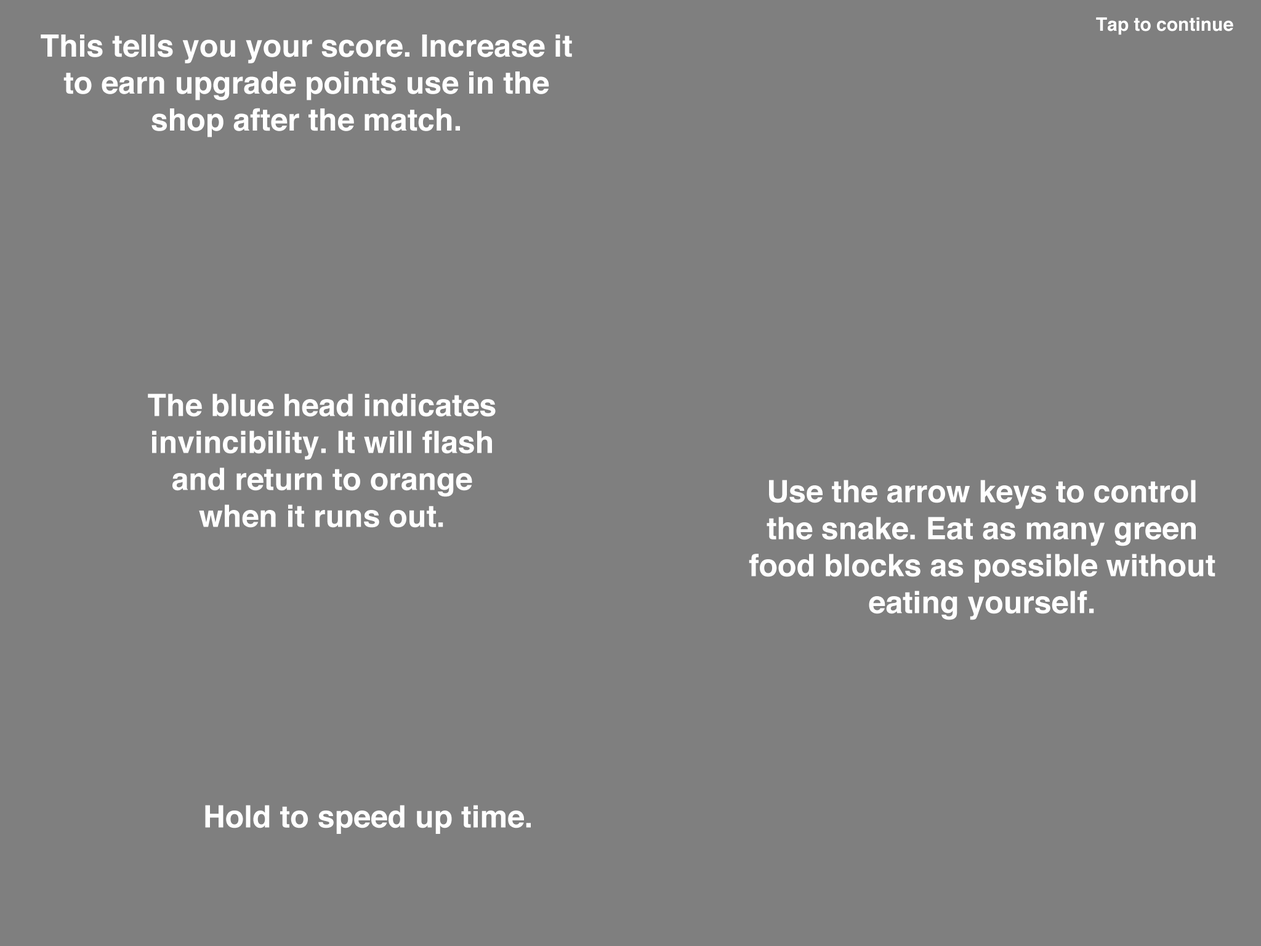
<style>
.page{position:relative;width:1261px;height:946px;background:#7f7f7f}
.page>*{position:absolute;margin:0}
.t1{font:18.5px "Helvetica-Bold";color:#ffffff}
.t2{font:30.8px "Helvetica-Bold";color:#ffffff}
</style>
<div class="page">
<p class="t1" style="left:1096px;top:17px;width:137px;height:18px">Tap to continue</p>
<p class="t2" style="left:41px;top:34px;width:531px;height:103px;text-align:center">This tells you your score. Increase it to earn upgrade points use in the shop after the match.</p>
<p class="t2" style="left:148px;top:393px;width:348px;height:135px;text-align:center">The blue head indicates invincibility. It will flash and return to orange when it runs out.</p>
<p class="t2" style="left:749px;top:480px;width:466px;height:140px;text-align:center">Use the arrow keys to control the snake. Eat as many green food blocks as possible without eating yourself.</p>
<p class="t2" style="left:205px;top:805px;width:326px;height:29px">Hold to speed up time.</p>
</div>
